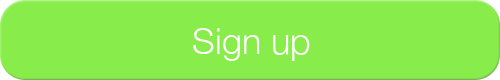
<style>
.page{position:relative;width:500px;height:80px;background:#88ed4a}
.page>*{position:absolute;margin:0}
.t1{font:36px "HelveticaNeue-Light";color:#ffffff}
</style>
<div class="page">
<p class="t1" style="left:193px;top:28px;width:117px;height:33px">Sign up</p>
</div>
